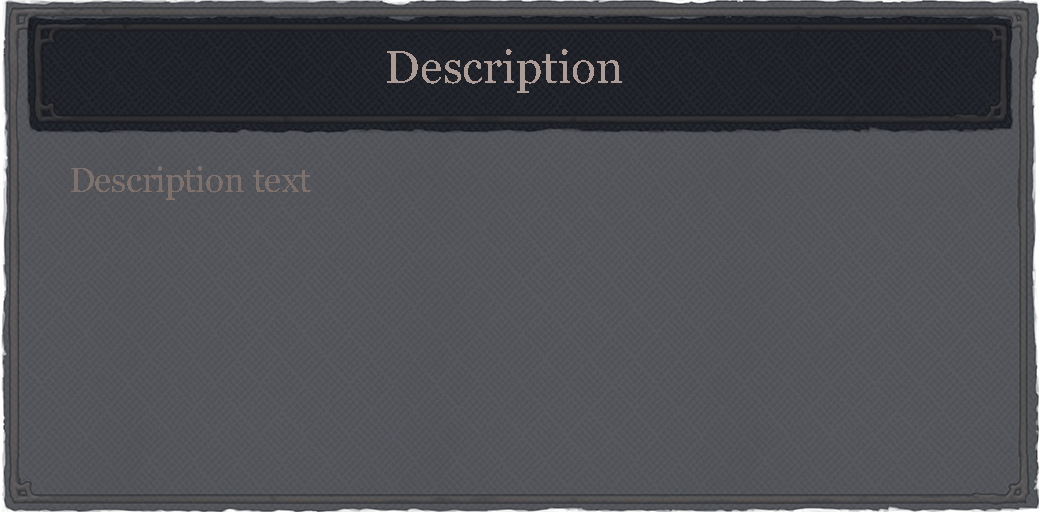
<style>
.page{position:relative;width:1039px;height:512px}
.page>*{position:absolute;margin:0}
.t1{font:46px "Georgia";color:#ad9c96}
.t2{font:34.5px "Georgia";color:#7e706a}
</style>
<div class="page">
<p class="t1" style="left:387px;top:49px;width:235px;height:44px">Description</p>
<p class="t2" style="left:71px;top:166px;width:240px;height:34px">Description text</p>
</div>
